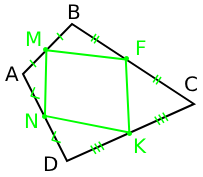
<style>
.page{position:relative;width:203px;height:177px;background:#ffffff}
.page>*{position:absolute;margin:0}
.t1{font:20px "DejaVuSans";color:#000000}
.t2{font:20px "DejaVuSans";color:#00ff00}
</style>
<div class="page">
<p class="t1" style="left:68px;top:4px;width:12px;height:15px">B</p>
<p class="t2" style="left:26px;top:31px;width:15px;height:15px">M</p>
<p class="t2" style="left:136px;top:40px;width:10px;height:15px">F</p>
<p class="t1" style="left:5px;top:66px;width:14px;height:15px">A</p>
<p class="t1" style="left:185px;top:76px;width:12px;height:16px">C</p>
<p class="t2" style="left:25px;top:113px;width:12px;height:15px">N</p>
<p class="t2" style="left:134px;top:138px;width:13px;height:15px">K</p>
<p class="t1" style="left:44px;top:156px;width:14px;height:15px">D</p>
</div>
